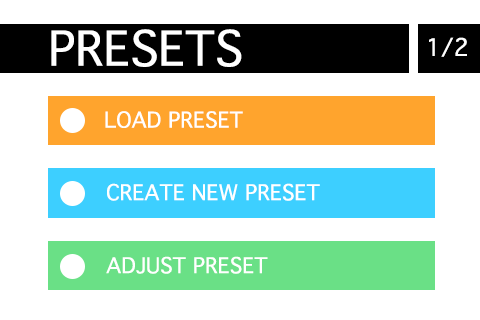
<style>
.page{position:relative;width:480px;height:320px;background:#ffffff}
.page>*{position:absolute;margin:0}
.t1{font:46.4px "Thonburi";color:#ffffff}
.t2{font:23.3px "Thonburi";color:#fefefe}
.t3{font:20.8px "Thonburi";color:#ffffff}
</style>
<div class="page">
<p class="t1" style="left:51px;top:29px;width:191px;height:38px">PRESETS</p>
<p class="t2" style="left:429px;top:37px;width:38px;height:20px">1/2</p>
<p class="t3" style="left:105px;top:111px;width:138px;height:17px">LOAD PRESET</p>
<p class="t3" style="left:107px;top:183px;width:213px;height:18px">CREATE NEW PRESET</p>
<p class="t3" style="left:106px;top:256px;width:162px;height:18px">ADJUST PRESET</p>
</div>
